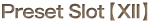
<style>
.page{position:relative;width:150px;height:23px;background:#ffffff}
.page>*{position:absolute;margin:0}
.t1{font:18px "GothicMB101Pro-DeBold";letter-spacing:-0.04em}
</style>
<div class="page">
<p class="t1" style="left:2px;top:2px;width:146px;height:19px">Preset Slot【     】</p>
<p class="t1" style="left:117px;top:4px;width:23px;height:15px">XII</p>
</div>
